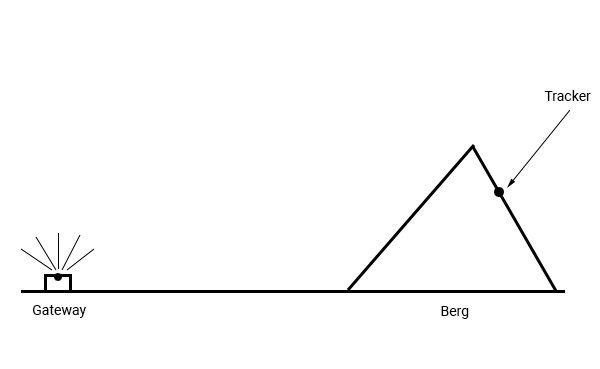
<style>
.page{position:relative;width:600px;height:369px;background:#ffffff}
.page>*{position:absolute;margin:0}
.t1{font:14px "Roboto-Regular";color:#000000}
</style>
<div class="page">
<p class="t1" style="left:544px;top:90px;width:47px;height:11px">Tracker</p>
<p class="t1" style="left:33px;top:305px;width:54px;height:13px">Gateway</p>
<p class="t1" style="left:441px;top:306px;width:28px;height:13px">Berg</p>
</div>
